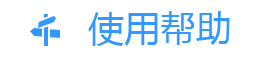
<style>
.page{position:relative;width:260px;height:60px;background:#ffffff}
.page>*{position:absolute;margin:0}
.t1{font:36px "MicrosoftYaHei";color:#3399ff}
</style>
<div class="page">
<p class="t1" style="left:88px;top:11px;width:142px;height:35px">使用帮助</p>
</div>
